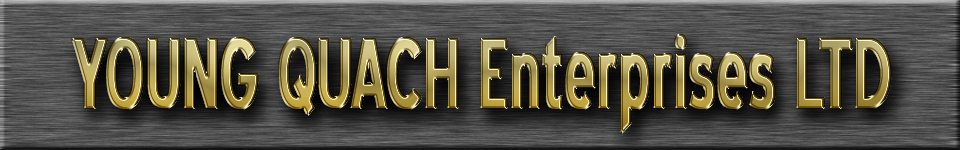
<style>
.page{position:relative;width:960px;height:150px}
.page>*{position:absolute;margin:0}
.t1{font:125px "BlueHighwayCondensed"}
</style>
<div class="page">
<p class="t1" style="left:72px;top:35px;width:819px;height:98px">YOUNG QUACH Enterprises LTD</p>
</div>
